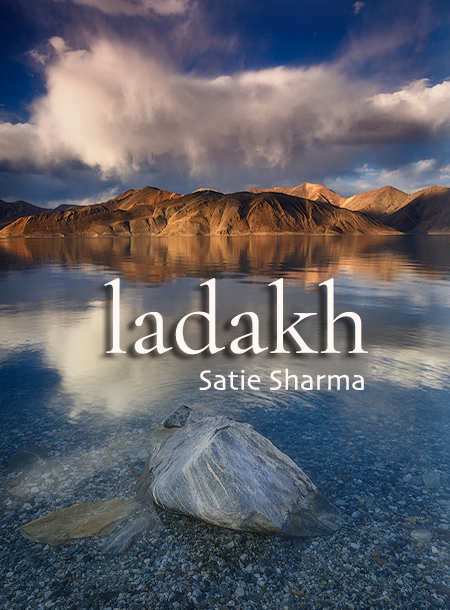
<style>
.page{position:relative;width:450px;height:610px}
.page>*{position:absolute;margin:0}
.t1{font:102.9px "CormorantGaramond-Regular";color:#fff7f4}
.t2{font:28.9px "Skia-Regular";color:#fff7f4}
</style>
<div class="page">
<p class="t1" style="left:104px;top:278px;width:264px;height:77px">ladakh</p>
<p class="t2" style="left:199px;top:368px;width:165px;height:22px">Satie Sharma</p>
</div>
